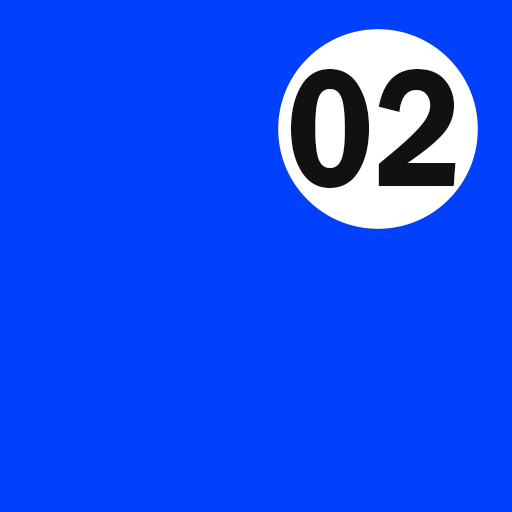
<style>
.page{position:relative;width:512px;height:512px;background:#0041ff}
.page>*{position:absolute;margin:0}
.t1{font:172.5px "FranklinGothic-Demi";color:#131010;scale:0.87 1}
</style>
<div class="page">
<p class="t1" style="left:290px;top:69px;width:166px;height:119px">02</p>
</div>
